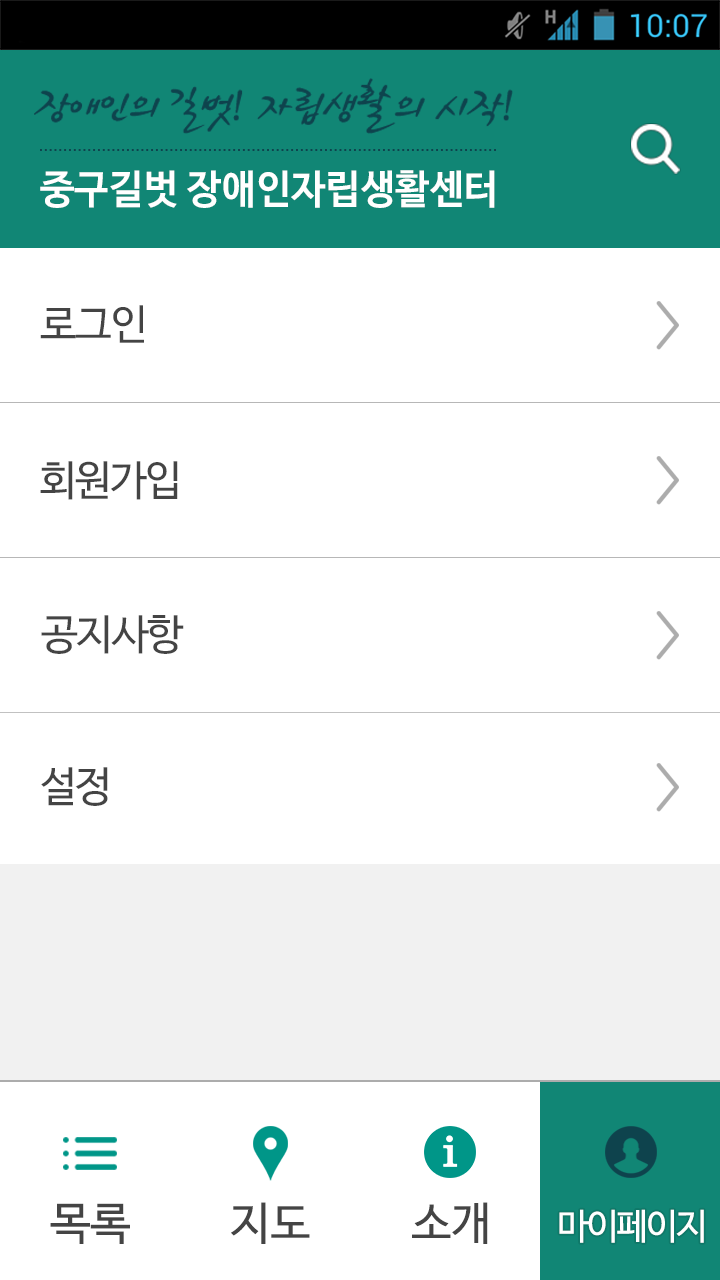
<style>
.page{position:relative;width:720px;height:1280px;background:#ffffff}
.page>*{position:absolute;margin:0}
.t1{font:40px "NanumBarunGothicOTFBold";letter-spacing:0.01em;color:#ffffff;scale:0.96 1}
.t2{font:42px "NanumBarunGothicOTF";letter-spacing:-0.03em;color:#444444}
.t3{font:45px "NanumBarunGothicOTF";color:#444444}
.t4{font:36px "NanumBarunGothicOTF";letter-spacing:-0.05em;color:#ffffff}
</style>
<div class="page">
<p class="t1" style="left:40px;top:170px;width:455px;height:38px">중구길벗 장애인자립생활센터</p>
<p class="t2" style="left:40px;top:305px;width:104px;height:38px">로그인</p>
<p class="t2" style="left:40px;top:461px;width:138px;height:39px">회원가입</p>
<p class="t2" style="left:41px;top:615px;width:143px;height:39px">공지사항</p>
<p class="t2" style="left:41px;top:767px;width:67px;height:39px">설정</p>
<p class="t3" style="left:50px;top:1203px;width:80px;height:41px">목록</p>
<p class="t3" style="left:231px;top:1202px;width:79px;height:42px">지도</p>
<p class="t3" style="left:412px;top:1202px;width:76px;height:42px">소개</p>
<p class="t4" style="left:559px;top:1209px;width:145px;height:34px">마이페이지</p>
</div>
